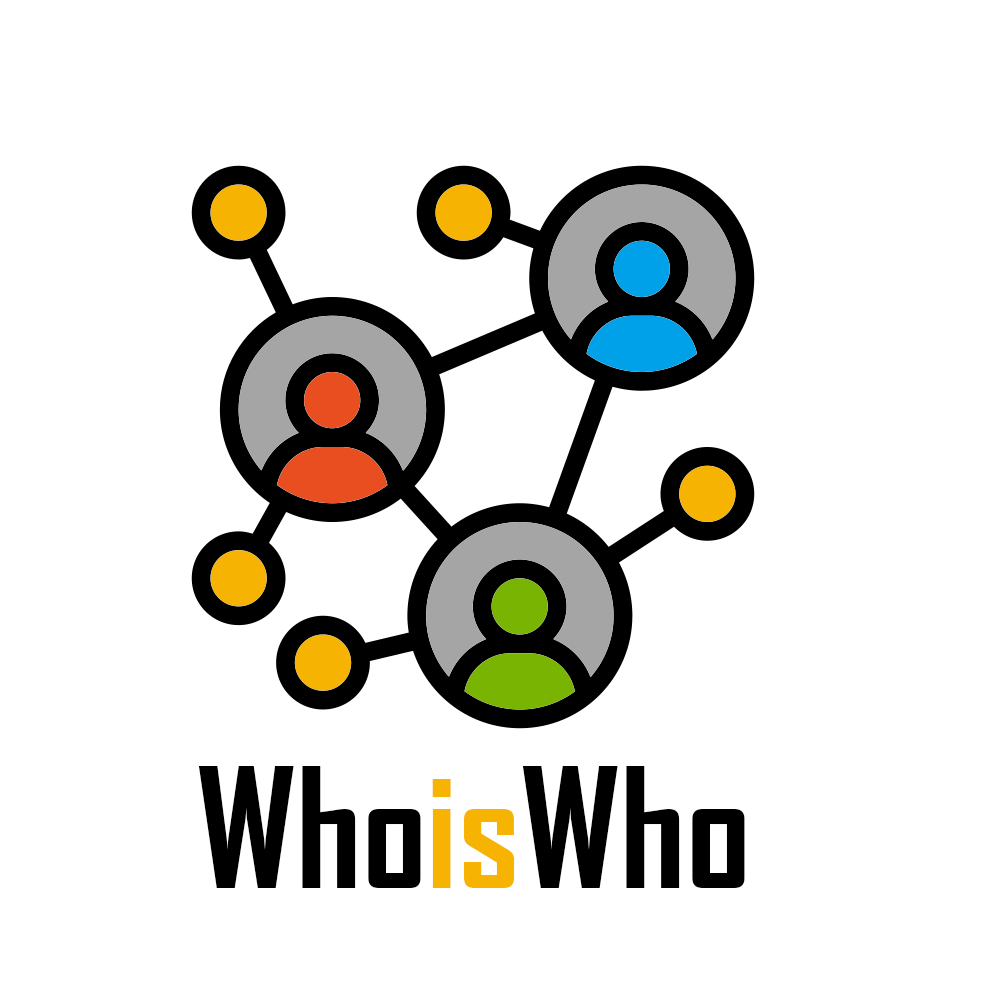
<style>
.page{position:relative;width:1000px;height:1000px;background:#ffffff}
.page>*{position:absolute;margin:0}
.t1{font:160px "AgencyFB-Bold";color:#000000}
.t2{font:160px "AgencyFB-Bold";color:#f7b301}
</style>
<div class="page">
<p class="t1" style="left:198px;top:766px;width:547px;height:122px">Who<span class="t2">is</span>Who</p>
</div>
